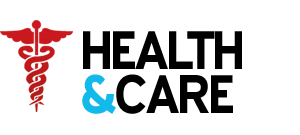
<style>
.page{position:relative;width:300px;height:135px;background:#ffffff}
.page>*{position:absolute;margin:0}
.t1{font:54.4px/43.5px "ExpresswayRg-Bold";letter-spacing:-0.025em;color:#000000;text-transform:uppercase}
.t2{font:54.4px/43.5px "ExpresswayRg-Bold";letter-spacing:-0.025em;color:#12baec;text-transform:uppercase}
</style>
<div class="page">
<p class="t1" style="left:82px;top:31px;width:160px;height:83px">Health<br><span class="t2">&amp;</span>CARE</p>
</div>
